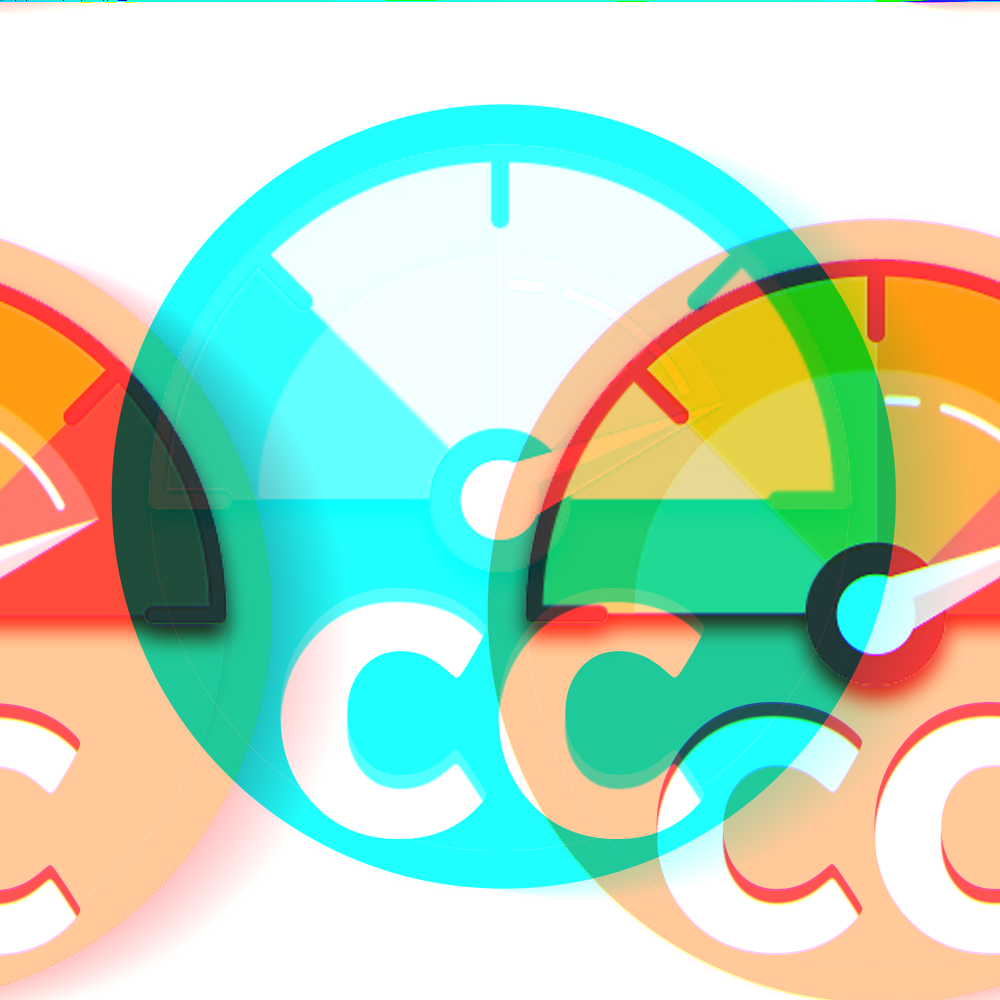
<style>
.page{position:relative;width:1000px;height:1000px;background:#ffffff}
.page>*{position:absolute;margin:0}
.t1{font:350px "BerlinSansFBDemi-Bold"}
</style>
<div class="page">
<p class="t1" style="left:280px;top:586px;width:425px;height:251px">CC</p>
</div>
